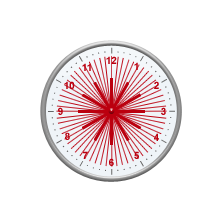
<style>
.page{position:relative;width:223px;height:223px;background:#ffffff}
.page>*{position:absolute;margin:0}
.t1{font:10px "Arial-BoldMT";color:#bb000f}
</style>
<div class="page">
<p class="t1" style="left:82px;top:63px;width:9px;height:8px">11</p>
<p class="t1" style="left:106px;top:56px;width:11px;height:8px">12</p>
<p class="t1" style="left:134px;top:62px;width:4px;height:8px">1</p>
<p class="t1" style="left:64px;top:81px;width:11px;height:8px">10</p>
<p class="t1" style="left:154px;top:81px;width:5px;height:8px">2</p>
<p class="t1" style="left:58px;top:107px;width:5px;height:8px">9</p>
<p class="t1" style="left:161px;top:107px;width:5px;height:8px">3</p>
<p class="t1" style="left:65px;top:132px;width:5px;height:8px">8</p>
<p class="t1" style="left:154px;top:133px;width:5px;height:8px">4</p>
<p class="t1" style="left:83px;top:151px;width:5px;height:8px">7</p>
<p class="t1" style="left:109px;top:158px;width:5px;height:8px">6</p>
<p class="t1" style="left:134px;top:151px;width:5px;height:8px">5</p>
</div>
